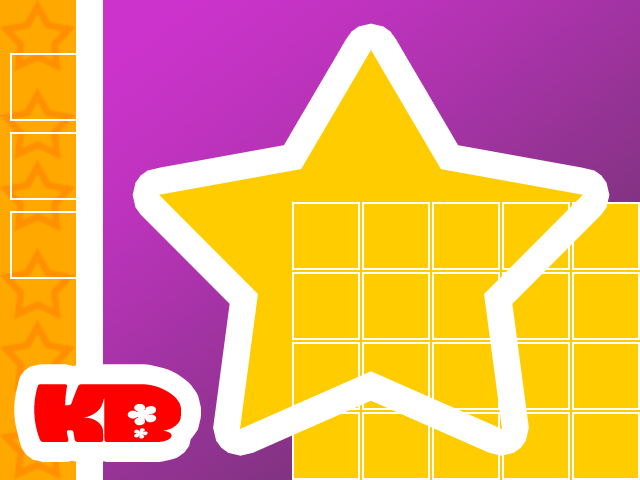
<style>
.page{position:relative;width:640px;height:480px;background:#ffcc00}
.page>*{position:absolute;margin:0}
.t1{font:105px "Chick";color:#ff0000}
</style>
<div class="page">
<p class="t1" style="left:34px;top:384px;width:147px;height:58px">KB</p>
</div>
